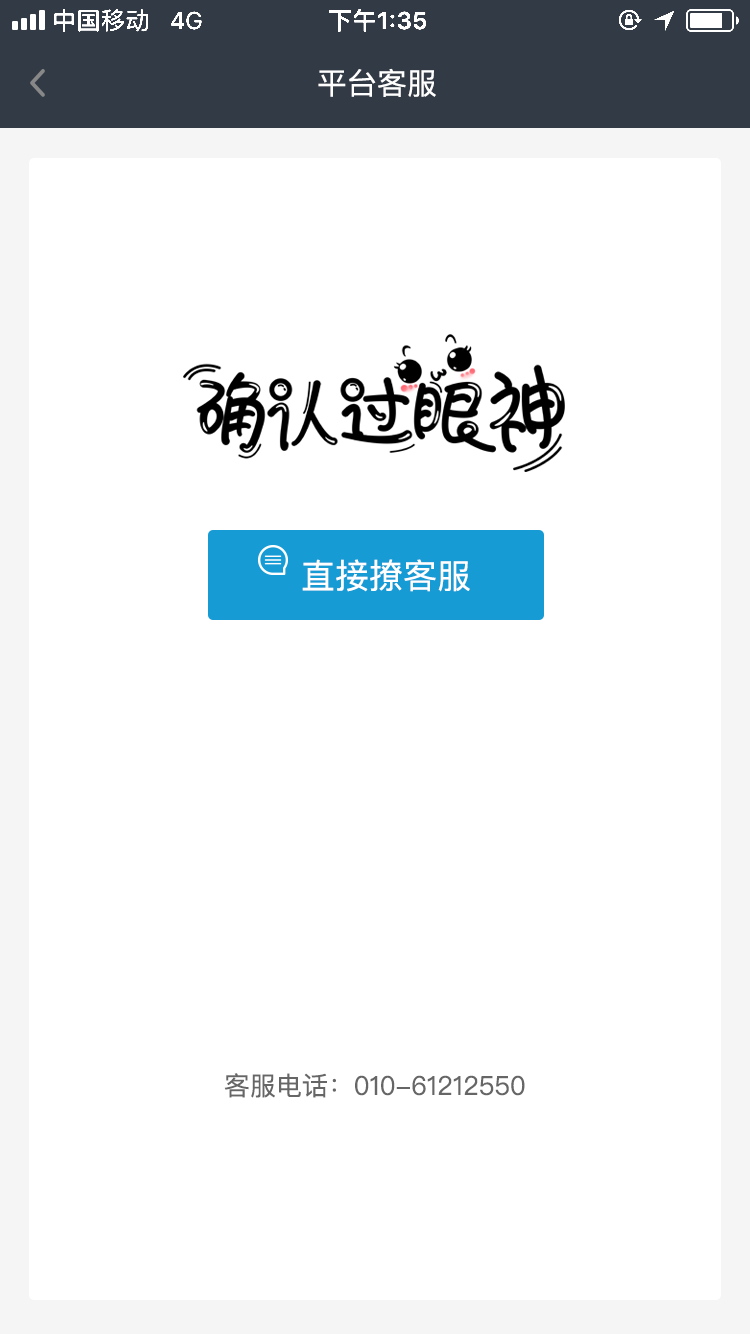
<style>
.page{position:relative;width:750px;height:1334px;background:#ffffff}
.page>*{position:absolute;margin:0}
.t1{font:30px "PingFangSC-Regular";color:#ffffff}
.t2{font:34px "PingFangSC-Regular";color:#ffffff}
.t3{font:26px "PingFangSC-Regular";color:#666666}
</style>
<div class="page">
<p class="t1" style="left:318px;top:68px;width:118px;height:29px">平台客服</p>
<p class="t2" style="left:302px;top:559px;width:168px;height:33px">直接撩客服</p>
<p class="t3" style="left:224px;top:1073px;width:301px;height:25px">客服电话：010-61212550</p>
</div>
